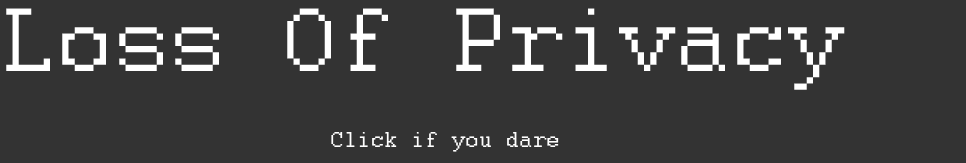
<style>
.page{position:relative;width:966px;height:163px;background:#333333}
.page>*{position:absolute;margin:0}
.t1{font:100px "Courier";color:#ffffff}
.t2{font:24px "Courier";color:#ffffff}
</style>
<div class="page">
<p class="t1" style="left:6px;top:8px;width:839px;height:82px">Loss Of Privacy</p>
<p class="t2" style="left:331px;top:132px;width:228px;height:20px">Click if you dare</p>
</div>
